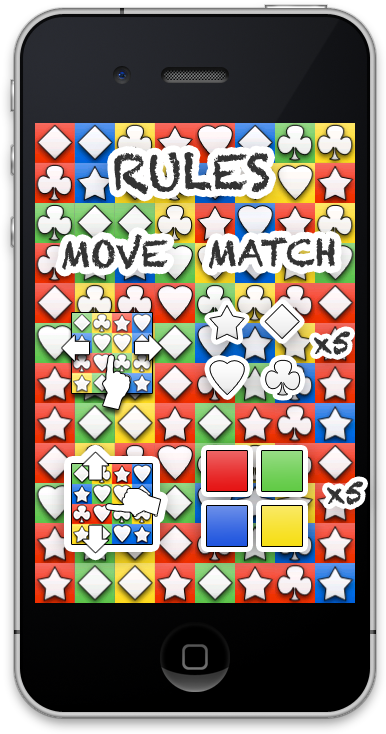
<style>
.page{position:relative;width:386px;height:734px}
.page>*{position:absolute;margin:0}
.t1{font:48px "Chalkduster";color:#333333}
.t2{font:36px "Chalkduster";color:#333333}
.t3{font:30px "Chalkduster";color:#333333}
</style>
<div class="page">
<p class="t1" style="left:114px;top:152px;width:156px;height:43px">RULES</p>
<p class="t2" style="left:62px;top:234px;width:106px;height:36px">MOVE</p>
<p class="t2" style="left:209px;top:237px;width:126px;height:32px">MATCH</p>
<p class="t3" style="left:314px;top:331px;width:36px;height:24px">x5</p>
<p class="t3" style="left:327px;top:481px;width:36px;height:24px">x5</p>
</div>
